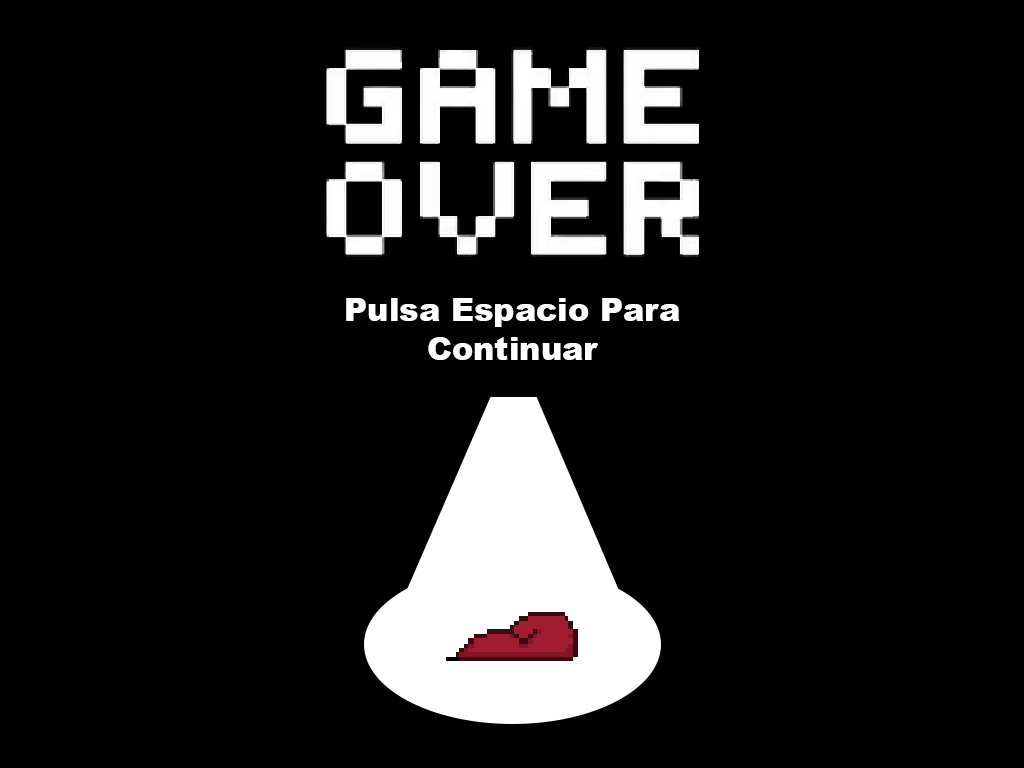
<style>
.page{position:relative;width:1024px;height:768px;background:#000000}
.page>*{position:absolute;margin:0}
.t1{font:32px "Arial-Black";color:#ffffff}
</style>
<div class="page">
<p class="t1" style="left:346px;top:298px;width:334px;height:62px;text-align:center">Pulsa Espacio Para Continuar</p>
</div>
